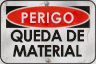
<style>
.page{position:relative;width:96px;height:64px}
.page>*{position:absolute;margin:0}
.t1{font:14.6px "CenturyGothic-Bold";letter-spacing:0.05em;color:#d6d7d6;text-transform:uppercase;scale:0.95 1}
.t2{font:16px/15.2px "CenturyGothic-Bold";letter-spacing:-0.04em;color:#1d1915;text-transform:uppercase}
</style>
<div class="page">
<p class="t1" style="left:21px;top:12px;width:53px;height:12px">perigo</p>
<p class="t2" style="left:10px;top:29px;width:74px;height:28px;text-align:center">QUEDA DE<br>MATERIAL</p>
</div>
